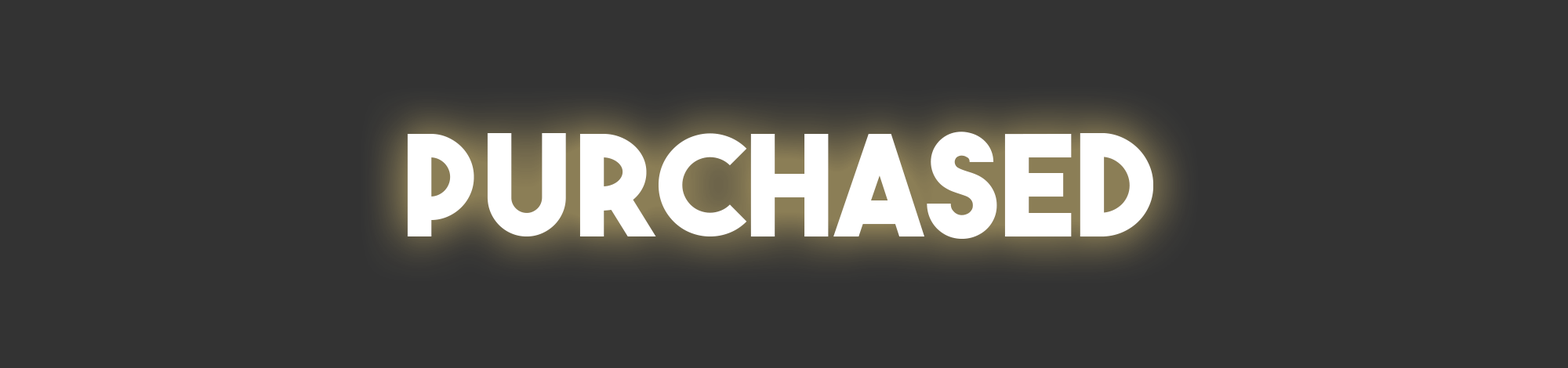
<style>
.page{position:relative;width:1568px;height:368px;background:#333333}
.page>*{position:absolute;margin:0}
.t1{font:140.2px "TheBoldFont";color:#ffffff}
</style>
<div class="page">
<p class="t1" style="left:407px;top:132px;width:746px;height:107px">PURCHASED</p>
</div>
